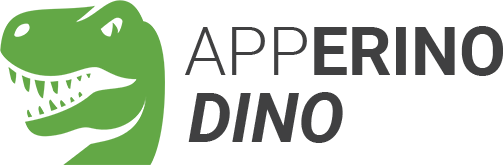
<style>
.page{position:relative;width:504px;height:165px;background:#ffffff}
.page>*{position:absolute;margin:0}
.t1{font:67.8px "Roboto-Bold";color:#404041}
.t2{font:67.8px "Roboto-Light";color:#404041}
.t3{font:68.5px "Roboto-BoldItalic";color:#404041}
</style>
<div class="page">
<p class="t1" style="left:185px;top:26px;width:318px;height:50px"><span class="t2">APP</span>ERINO</p>
<p class="t3" style="left:188px;top:92px;width:155px;height:51px">DINO</p>
</div>
